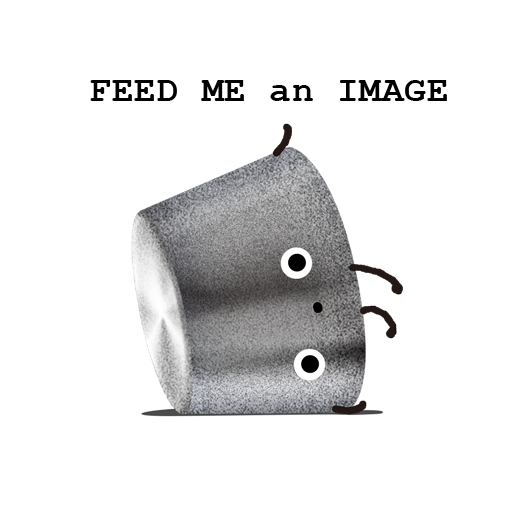
<style>
.page{position:relative;width:512px;height:512px;background:#ffffff}
.page>*{position:absolute;margin:0}
.t1{font:36px "CourierNewPS-BoldMT";letter-spacing:0.025em;color:#000000}
</style>
<div class="page">
<p class="t1" style="left:90px;top:80px;width:357px;height:21px">FEED ME an IMAGE</p>
</div>
